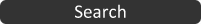
<style>
.page{position:relative;width:201px;height:24px;background:#333333}
.page>*{position:absolute;margin:0}
.t1{font:19.2px "Calibri";color:#ffffff}
</style>
<div class="page">
<p class="t1" style="left:75px;top:4px;width:51px;height:14px">Search</p>
</div>
